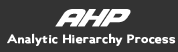
<style>
.page{position:relative;width:178px;height:52px;background:#333333}
.page>*{position:absolute;margin:0}
.t1{font:26.3px "NFSfont";color:#ffffff;font-weight:bold;scale:1.17 1}
.t2{font:11.1px "Ancillary-Bold";color:#ffffff;font-weight:bold;scale:1.17 1}
</style>
<div class="page">
<p class="t1" style="left:55px;top:9px;width:76px;height:18px">AHP</p>
<p class="t2" style="left:7px;top:33px;width:169px;height:13px">Analytic Hierarchy Process</p>
</div>
